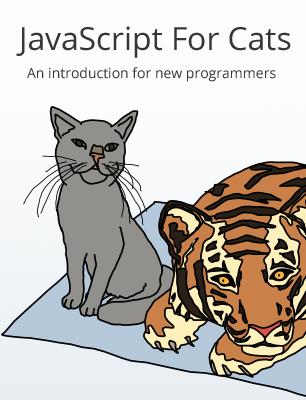
<style>
.page{position:relative;width:306px;height:400px;background:#fdfdfd}
.page>*{position:absolute;margin:0}
.t1{font:31.7px "OpenSans";color:#363636}
.t2{font:14px "OpenSans";color:#363636}
</style>
<div class="page">
<p class="t1" style="left:16px;top:26px;width:275px;height:32px">JavaScript For Cats</p>
<p class="t2" style="left:27px;top:67px;width:249px;height:15px">An introduction for new programmers</p>
</div>
